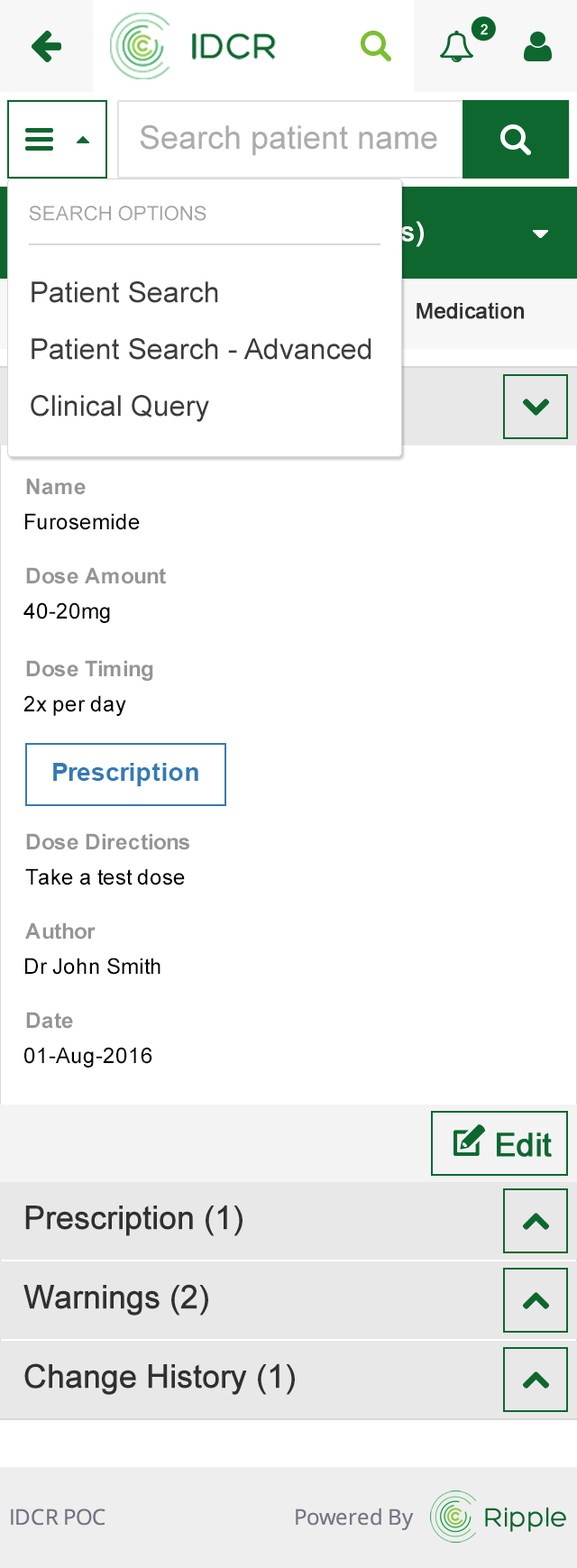
<style>
.page{position:relative;width:577px;height:1568px;background:#ffffff}
.page>*{position:absolute;margin:0}
.t1{font:32.5px "ArialMT";color:#acacac}
.t2{font:19.8px "ArialMT";color:#a3a3a3}
.t3{font:28.9px "ArialMT";color:#3c3c3c}
.t4{font:21.6px "ArialMT";color:#313131;font-weight:bold}
.t5{font:21.6px "Arial-BoldMT";color:#959595}
.t6{font:21.6px "ArialMT";color:#000000}
.t7{font:25.2px "Arial-BoldMT";color:#337ab7}
.t8{font:32.5px "ArialMT";color:#303030;font-weight:bold}
</style>
<div class="page">
<p class="t1" style="left:140px;top:124px;width:297px;height:32px">Search patient name</p>
<p class="t2" style="left:29px;top:206px;width:177px;height:15px">SEARCH OPTIONS</p>
<p class="t3" style="left:32px;top:281px;width:186px;height:22px">Patient Search</p>
<p class="t4" style="left:417px;top:302px;width:107px;height:17px">Medication</p>
<p class="t3" style="left:32px;top:338px;width:339px;height:22px">Patient Search - Advanced</p>
<p class="t3" style="left:31px;top:395px;width:178px;height:27px">Clinical Query</p>
<p class="t5" style="left:26px;top:478px;width:60px;height:17px">Name</p>
<p class="t6" style="left:25px;top:513px;width:115px;height:17px">Furosemide</p>
<p class="t5" style="left:26px;top:567px;width:140px;height:17px">Dose Amount</p>
<p class="t6" style="left:23px;top:602px;width:87px;height:21px">40-20mg</p>
<p class="t5" style="left:26px;top:660px;width:127px;height:21px">Dose Timing</p>
<p class="t6" style="left:23px;top:695px;width:103px;height:21px">2x per day</p>
<p class="t7" style="left:53px;top:763px;width:145px;height:23px">Prescription</p>
<p class="t5" style="left:26px;top:833px;width:163px;height:17px">Dose Directions</p>
<p class="t6" style="left:25px;top:868px;width:160px;height:17px">Take a test dose</p>
<p class="t5" style="left:25px;top:922px;width:71px;height:18px">Author</p>
<p class="t6" style="left:25px;top:958px;width:135px;height:17px">Dr John Smith</p>
<p class="t5" style="left:26px;top:1012px;width:47px;height:17px">Date</p>
<p class="t6" style="left:24px;top:1047px;width:128px;height:21px">01-Aug-2016</p>
<p class="t8" style="left:25px;top:1205px;width:218px;height:31px">Prescription (1)</p>
<p class="t8" style="left:23px;top:1284px;width:185px;height:32px">Warnings (2)</p>
<p class="t8" style="left:24px;top:1363px;width:271px;height:32px">Change History (1)</p>
</div>
